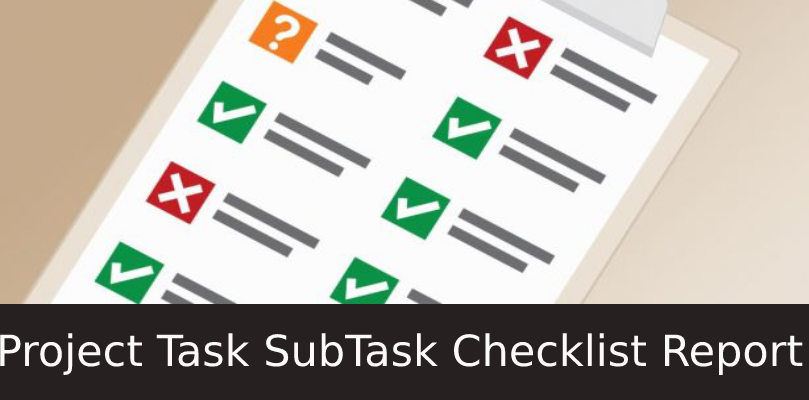
<style>
.page{position:relative;width:809px;height:400px;background:#fcfcfc}
.page>*{position:absolute;margin:0}
.t1{font:43px "DejaVuSans";color:#fbf9f9}
</style>
<div class="page">
<p class="t1" style="left:0px;top:333px;width:803px;height:42px">Project Task SubTask Checklist Report</p>
</div>
